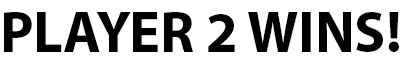
<style>
.page{position:relative;width:400px;height:65px;background:#ffffff}
.page>*{position:absolute;margin:0}
.t1{font:58px "MyriadPro-Bold";color:#000000}
</style>
<div class="page">
<p class="t1" style="left:4px;top:12px;width:395px;height:40px">PLAYER 2 WINS!</p>
</div>
